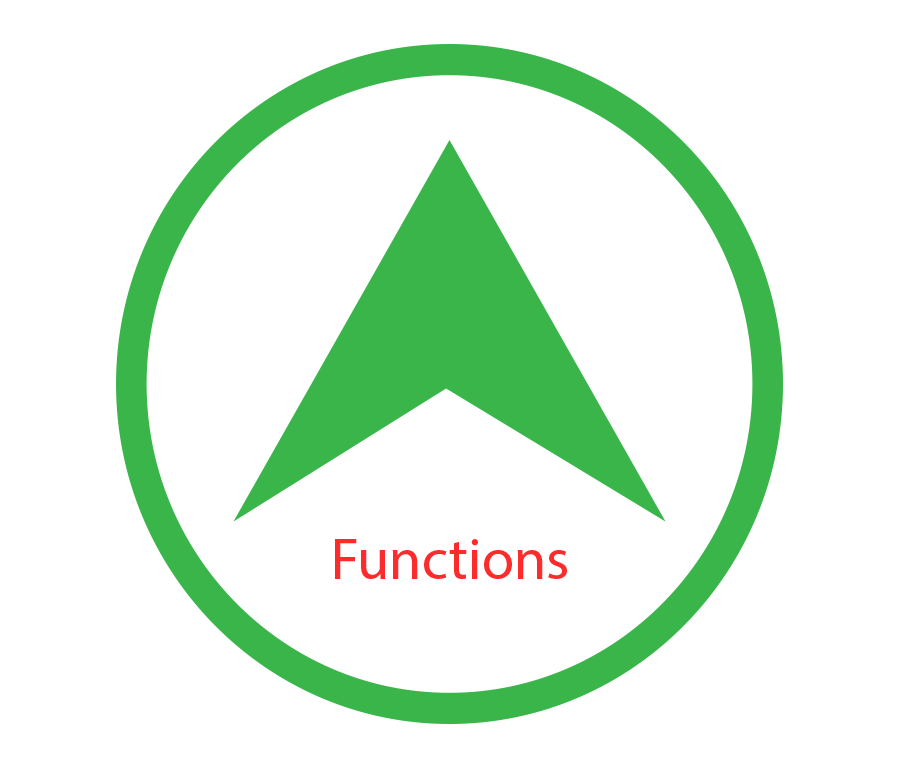
<style>
.page{position:relative;width:900px;height:768px;background:#ffffff}
.page>*{position:absolute;margin:0}
.t1{font:58.3px "MyriadPro-Regular";color:#fd2c2c}
</style>
<div class="page">
<p class="t1" style="left:335px;top:539px;width:232px;height:40px">Functions</p>
</div>
